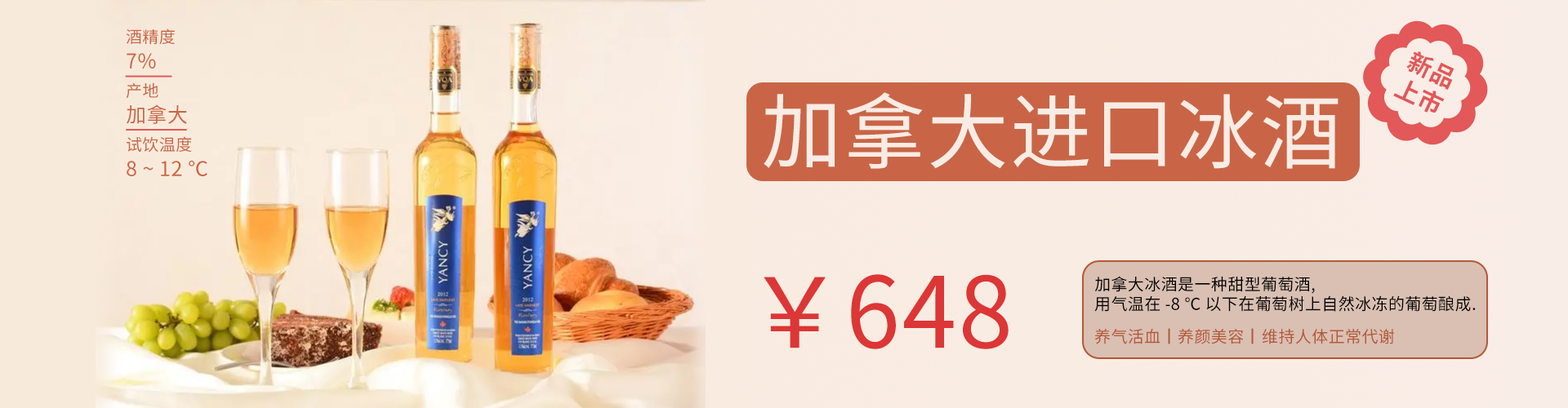
<style>
.page{position:relative;width:1568px;height:408px}
.page>*{position:absolute;margin:0}
.t1{font:16.3px "SourceHanSansCN-Regular";letter-spacing:0.02em;color:#c96546}
.t2{font:20.4px "SourceHanSansCN-Regular";letter-spacing:0.02em;color:#c96546}
.t3{font:24.5px "SourceHanSansCN-Bold";letter-spacing:0.02em;color:#e35858}
.t4{font:81.7px "SourceHanSansCN-Regular";letter-spacing:0.02em;color:#f9ece4}
.t5{font:98px "SourceHanSansCN-Regular";letter-spacing:0.02em;color:#dc3636}
.t6{font:16.3px "SourceHanSansCN-Regular";letter-spacing:0.02em;color:#000000}
.t7{font:16.3px "SourceHanSansCN-Regular";letter-spacing:0.02em;color:#b55736}
</style>
<div class="page">
<p class="t1" style="left:126px;top:29px;width:49px;height:15px">酒精度</p>
<p class="t2" style="left:127px;top:53px;width:29px;height:16px">7%</p>
<p class="t3" style="left:1393px;top:51px;width:61px;height:62px;text-align:center;rotate:25deg">新品<br>上市</p>
<p class="t1" style="left:126px;top:82px;width:32px;height:17px">产地</p>
<p class="t4" style="left:764px;top:92px;width:575px;height:77px">加拿大进口冰酒</p>
<p class="t2" style="left:127px;top:105px;width:60px;height:19px">加拿大</p>
<p class="t1" style="left:127px;top:136px;width:65px;height:17px">试饮温度</p>
<p class="t2" style="left:127px;top:160px;width:80px;height:16px">8 ~ 12 ℃</p>
<p class="t5" style="left:764px;top:274px;width:245px;height:76px">￥648</p>
<p class="t6" style="left:1094px;top:276px;width:382px;height:36px">加拿大冰酒是一种甜型葡萄酒, <br>用气温在 -8 ℃ 以下在葡萄树上自然冰冻的葡萄酿成.</p>
<p class="t7" style="left:1094px;top:328px;width:66px;height:17px">养气活血</p>
<p class="t7" style="left:1178px;top:329px;width:66px;height:16px">养颜美容</p>
<p class="t7" style="left:1262px;top:329px;width:132px;height:16px">维持人体正常代谢</p>
</div>
